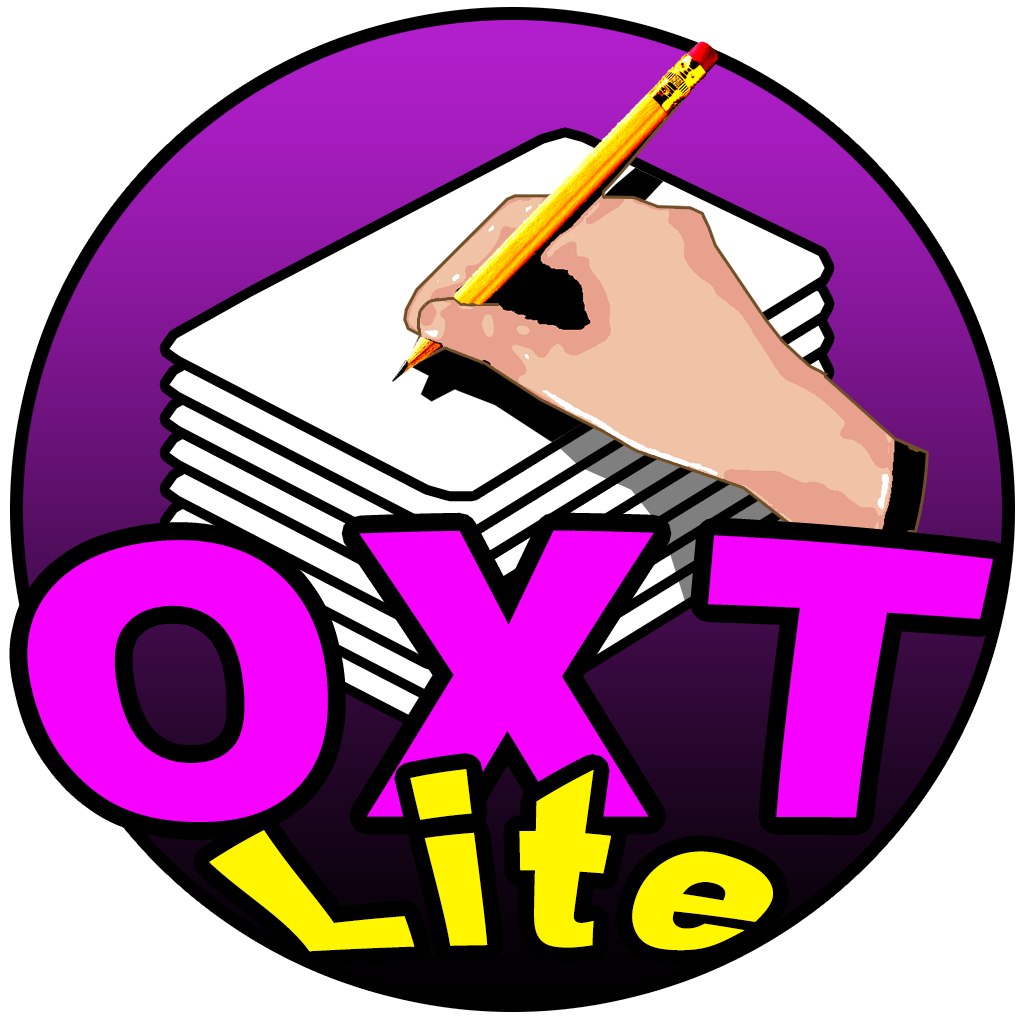
<style>
.page{position:relative;width:1024px;height:1024px;background:#ffffff}
.page>*{position:absolute;margin:0}
.t1{font:358.9px "Arial-Black";letter-spacing:0.1em;color:#f600ff}
.t2{font:169.9px "Arial-Black";letter-spacing:0.1em;color:#fff600}
</style>
<div class="page">
<p class="t1" style="left:27px;top:530px;width:966px;height:292px">OXT</p>
<p class="t2" style="left:209px;top:769px;width:564px;height:183px">Lite</p>
</div>
